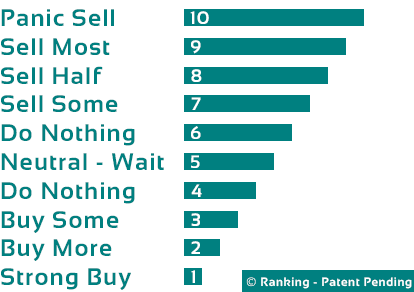
<style>
.page{position:relative;width:414px;height:292px;background:#ffffff}
.page>*{position:absolute;margin:0}
.t1{font:24px "Sansation-Bold";letter-spacing:0.05em;color:#008080}
.t2{font:18px "Sansation-Bold";letter-spacing:0.05em;color:#ffffff}
.t3{font:12px "Sansation-Bold";letter-spacing:0.05em;color:#ffffff}
</style>
<div class="page">
<p class="t1" style="left:1px;top:9px;width:163px;height:281px">Panic Sell<br>Sell Most<br>Sell Half<br>Sell Some<br>Do Nothing<br>Neutral - Wait<br>Do Nothing<br>Buy Some<br>Buy More<br>Strong Buy</p>
<p class="t2" style="left:190px;top:11px;width:19px;height:13px">10</p>
<p class="t2" style="left:191px;top:40px;width:10px;height:14px">9</p>
<p class="t2" style="left:191px;top:69px;width:11px;height:13px">8</p>
<p class="t2" style="left:191px;top:97px;width:10px;height:13px">7</p>
<p class="t2" style="left:191px;top:126px;width:10px;height:13px">6</p>
<p class="t2" style="left:191px;top:155px;width:9px;height:13px">5</p>
<p class="t2" style="left:191px;top:184px;width:11px;height:13px">4</p>
<p class="t2" style="left:191px;top:213px;width:9px;height:13px">3</p>
<p class="t2" style="left:191px;top:241px;width:9px;height:13px">2</p>
<p class="t2" style="left:191px;top:270px;width:4px;height:13px">1</p>
<p class="t3" style="left:246px;top:277px;width:166px;height:12px">© Ranking - Patent Pending</p>
</div>
